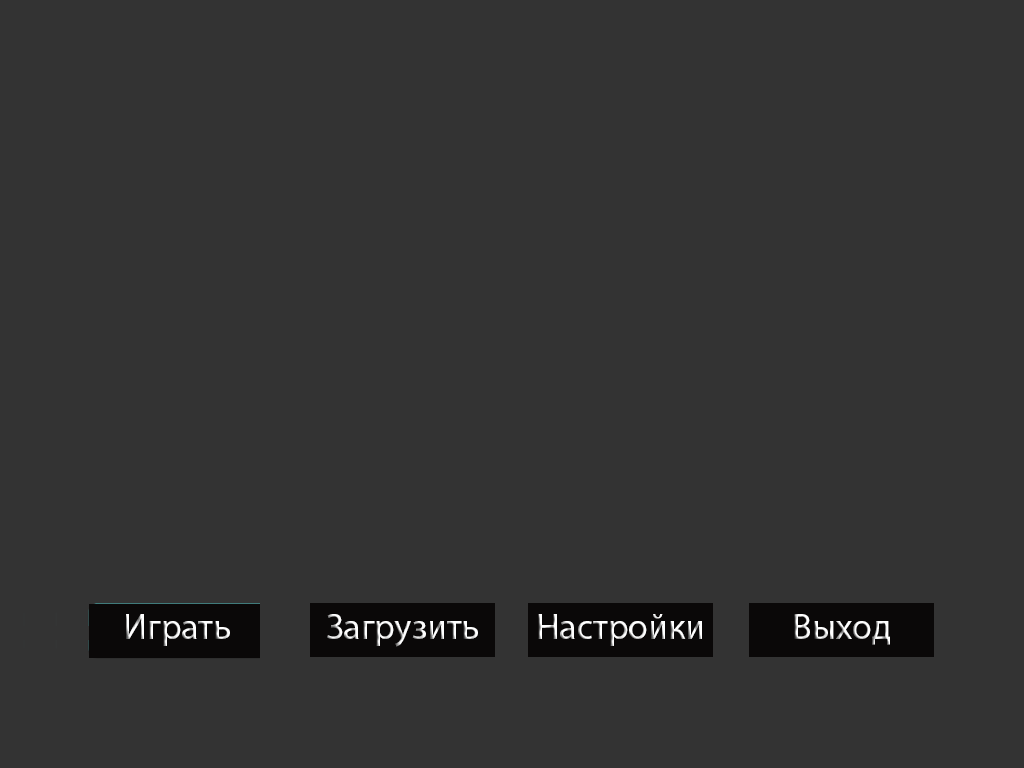
<style>
.page{position:relative;width:1024px;height:768px;background:#333333}
.page>*{position:absolute;margin:0}
.t1{font:36px "MyriadPro-Regular"}
.t2{font:36px "MyriadPro-Regular";color:#ffffff}
</style>
<div class="page">
<p class="t1" style="left:126px;top:614px;width:104px;height:32px">Играть</p>
<p class="t1" style="left:327px;top:614px;width:151px;height:33px">Загрузить</p>
<p class="t1" style="left:538px;top:614px;width:164px;height:32px">Настройки</p>
<p class="t2" style="left:794px;top:614px;width:96px;height:31px">Выход</p>
</div>
